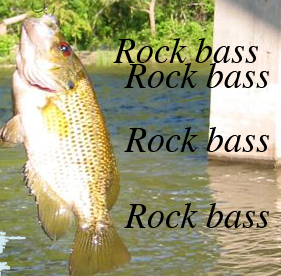
<style>
.page{position:relative;width:281px;height:276px}
.page>*{position:absolute;margin:0}
.t1{font:36px "Times-Italic";color:#000000}
</style>
<div class="page">
<p class="t1" style="left:113px;top:38px;width:145px;height:25px">Rock bass</p>
<p class="t1" style="left:124px;top:63px;width:145px;height:25px">Rock bass</p>
<p class="t1" style="left:124px;top:127px;width:145px;height:25px">Rock bass</p>
<p class="t1" style="left:124px;top:203px;width:145px;height:25px">Rock bass</p>
</div>
